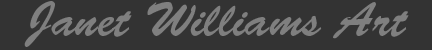
<style>
.page{position:relative;width:432px;height:50px;background:#333333}
.page>*{position:absolute;margin:0}
.t1{font:48px "BrushScriptStd";color:#7f7f7f}
</style>
<div class="page">
<p class="t1" style="left:24px;top:1px;width:385px;height:46px">Janet Williams Art</p>
</div>
